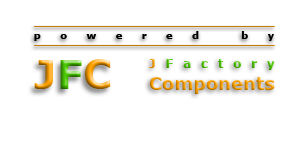
<style>
.page{position:relative;width:300px;height:144px;background:#ffffff}
.page>*{position:absolute;margin:0}
.t1{font:10px "Verdana-Bold";letter-spacing:1.94em;color:#000000}
.t2{font:40px "Verdana-Bold";color:#ffa200}
.t3{font:40px "Verdana-Bold";color:#4bc800}
.t4{font:18px "Verdana-Bold";color:#ffa200}
.t5{font:12px "Verdana-Bold";letter-spacing:0.82em;color:#ffa200}
.t6{font:12px "Verdana-Bold";letter-spacing:0.82em;color:#4bc800}
</style>
<div class="page">
<p class="t1" style="left:34px;top:31px;width:240px;height:10px">powered by</p>
<p class="t2" style="left:34px;top:59px;width:77px;height:30px">J<span class="t3">F</span>C</p>
<p class="t4" style="left:149px;top:59px;width:126px;height:35px"><span class="t5">J</span><span class="t6">Factory<br></span>Components</p>
</div>
